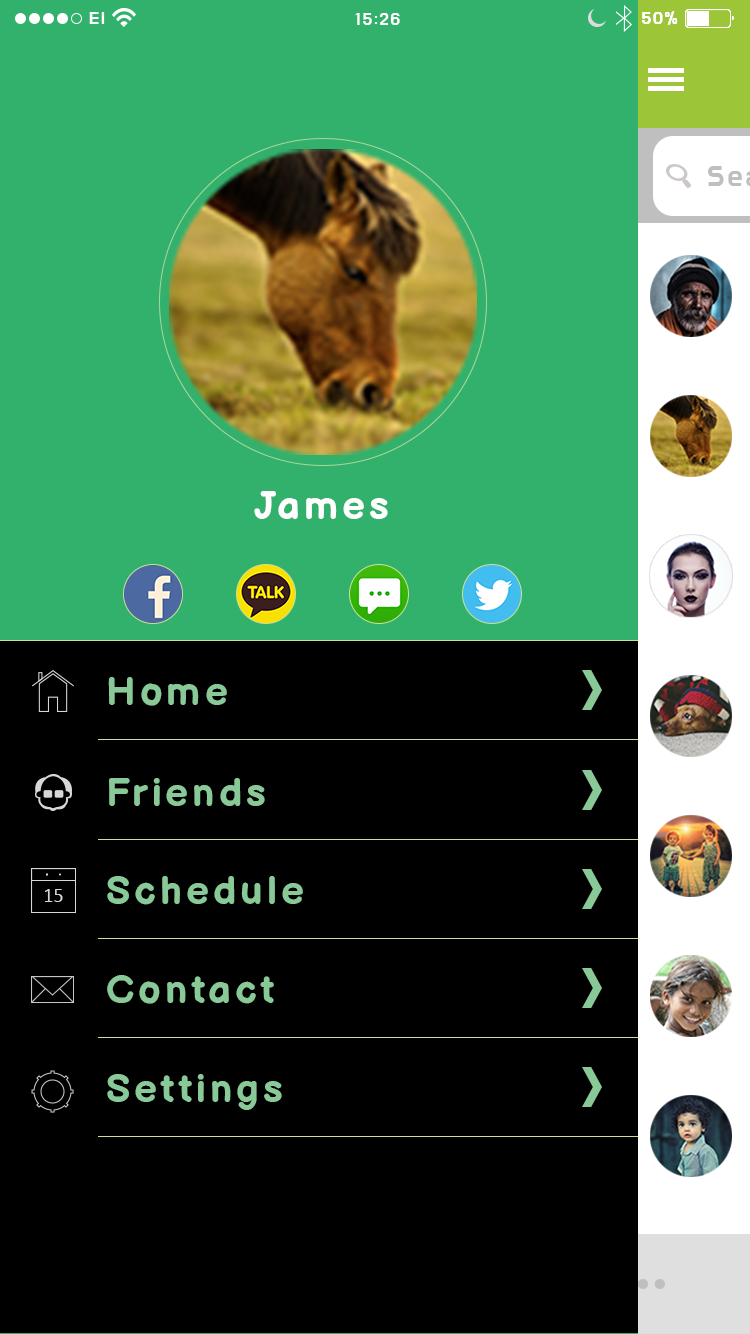
<style>
.page{position:relative;width:750px;height:1334px;background:#000000}
.page>*{position:absolute;margin:0}
.t1{font:18px "DoHyeon-Regular";letter-spacing:0.1em;color:#ffffff}
.t2{font:40px "BalsamiqSans-Bold";letter-spacing:0.1em;color:#ffffff}
.t3{font:40px "BalsamiqSans-Bold";letter-spacing:0.1em;color:#89c997}
</style>
<div class="page">
<p class="t1" style="left:89px;top:12px;width:16px;height:12px">El</p>
<p class="t1" style="left:89px;top:12px;width:16px;height:12px">El</p>
<p class="t1" style="left:355px;top:13px;width:45px;height:12px">15:26</p>
<p class="t1" style="left:355px;top:13px;width:45px;height:12px">15:26</p>
<p class="t1" style="left:642px;top:11px;width:36px;height:14px">50%</p>
<p class="t1" style="left:642px;top:11px;width:36px;height:14px">50%</p>
<p class="t2" style="left:254px;top:491px;width:134px;height:28px">James</p>
<p class="t3" style="left:108px;top:677px;width:119px;height:29px">Home</p>
<p class="t3" style="left:109px;top:778px;width:156px;height:28px">Friends</p>
<p class="t3" style="left:107px;top:876px;width:196px;height:29px">Schedule</p>
<p class="t3" style="left:107px;top:975px;width:167px;height:29px">Contact</p>
<p class="t3" style="left:107px;top:1074px;width:175px;height:36px">Settings</p>
</div>
